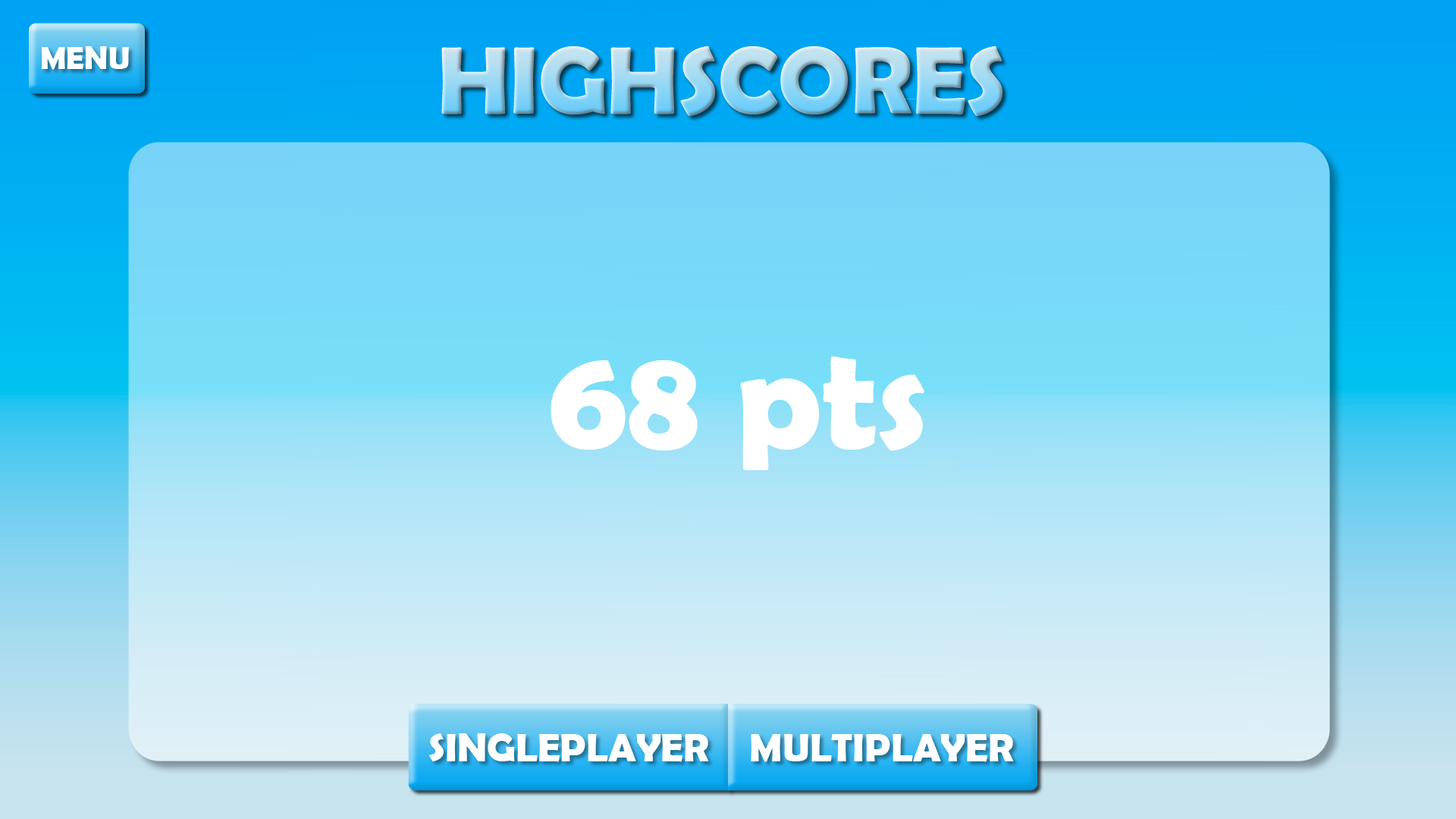
<style>
.page{position:relative;width:1456px;height:819px}
.page>*{position:absolute;margin:0}
.t1{font:32.1px "BerlinSansFBDemi-Bold";color:#ffffff}
.t2{font:96.3px "BerlinSansFBDemi-Bold"}
.t3{font:144.5px "BerlinSansFBDemi-Bold";color:#ffffff}
.t4{font:40.1px "BerlinSansFBDemi-Bold";color:#ffffff}
</style>
<div class="page">
<p class="t1" style="left:41px;top:46px;width:88px;height:24px">MENU</p>
<p class="t2" style="left:441px;top:46px;width:562px;height:70px">HIGHSCORES</p>
<p class="t3" style="left:551px;top:356px;width:373px;height:114px">68 pts</p>
<p class="t4" style="left:429px;top:733px;width:280px;height:29px">SINGLEPLAYER</p>
<p class="t4" style="left:751px;top:734px;width:263px;height:28px">MULTIPLAYER</p>
</div>
